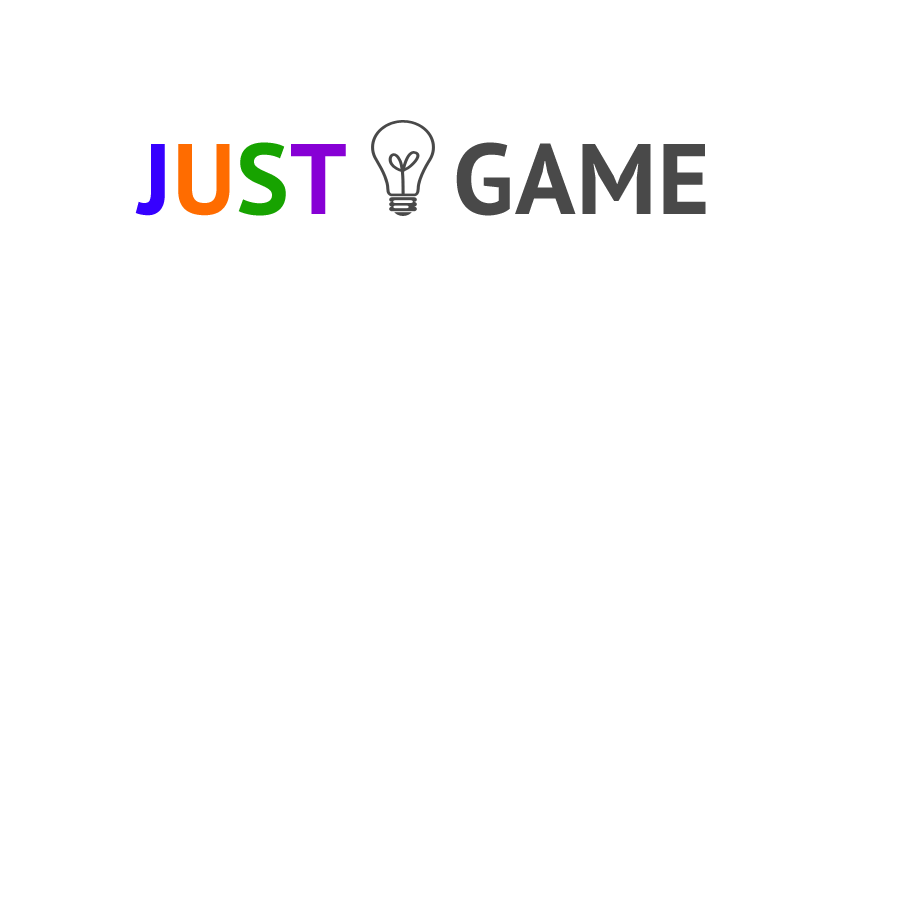
<style>
.page{position:relative;width:900px;height:900px;background:#ffffff}
.page>*{position:absolute;margin:0}
.t1{font:100px "PTSans-Bold";letter-spacing:0.01em;color:#494949}
.t2{font:100px "PTSans-Bold";letter-spacing:0.01em;color:#3600ff}
.t3{font:100px "PTSans-Bold";letter-spacing:0.01em;color:#ff6c00}
.t4{font:100px "PTSans-Bold";letter-spacing:0.01em;color:#17a300}
.t5{font:100px "PTSans-Bold";letter-spacing:0.01em;color:#8700d5}
</style>
<div class="page">
<p class="t1" style="left:135px;top:142px;width:571px;height:74px"><span class="t2">J</span><span class="t3">U</span><span class="t4">S</span><span class="t5">T    </span>GAME</p>
</div>
